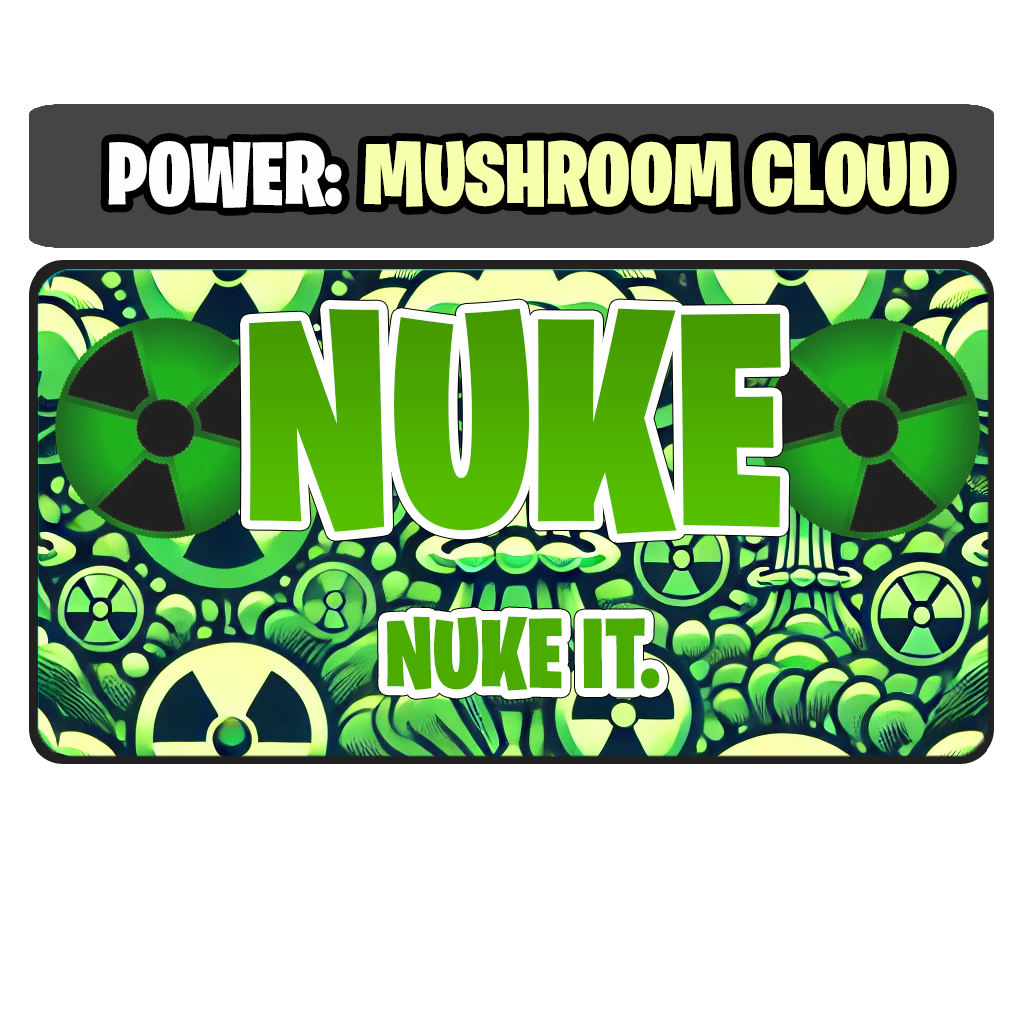
<style>
.page{position:relative;width:1024px;height:1024px;background:#ffffff}
.page>*{position:absolute;margin:0}
.t1{font:90px "BurbankBigCondensed-Black";color:#fefefe}
.t2{font:90px "BurbankBigCondensed-Black";color:#f7ffac}
.t3{font:304.1px "BurbankBigCondensed-Black";color:#4dad00}
.t4{font:100px "BurbankBigCondensed-Black";color:#4cab00}
</style>
<div class="page">
<p class="t1" style="left:108px;top:140px;width:234px;height:68px">POWER:</p>
<p class="t2" style="left:364px;top:140px;width:585px;height:67px">MUSHROOM CLOUD</p>
<p class="t3" style="left:249px;top:308px;width:532px;height:226px">NUKE</p>
<p class="t4" style="left:387px;top:616px;width:273px;height:75px">NUKE IT.</p>
</div>
